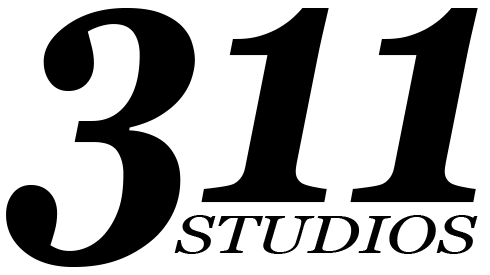
<style>
.page{position:relative;width:490px;height:275px;background:#ffffff}
.page>*{position:absolute;margin:0}
.t1{font:358.4px "Georgia-BoldItalic";color:#000000;scale:0.85 1}
.t2{font:53.4px "Georgia-Italic";color:#000000;text-transform:uppercase;scale:1.29 1}
</style>
<div class="page">
<p class="t1" style="left:6px;top:8px;width:472px;height:259px">311</p>
<p class="t2" style="left:174px;top:215px;width:304px;height:39px">studios</p>
</div>
